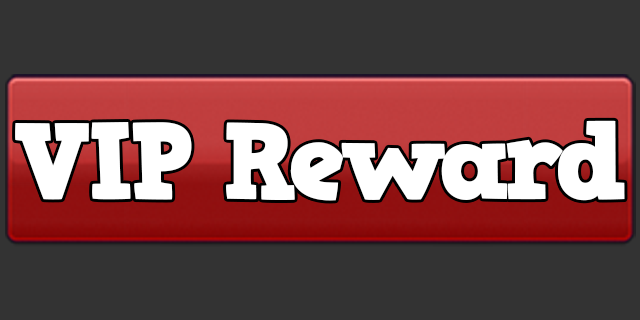
<style>
.page{position:relative;width:640px;height:320px;background:#333333}
.page>*{position:absolute;margin:0}
.t1{font:109px "HVDComicSerifPro";letter-spacing:-0.05em;color:#ffffff}
</style>
<div class="page">
<p class="t1" style="left:15px;top:120px;width:610px;height:81px">VIP Reward</p>
</div>
